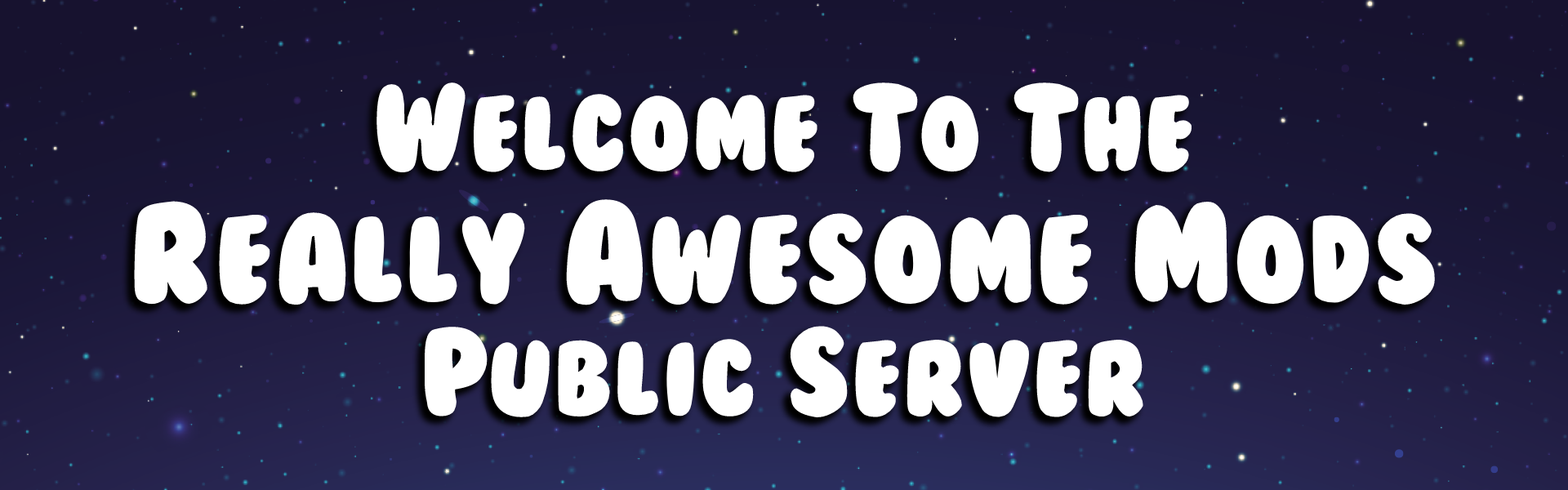
<style>
.page{position:relative;width:1568px;height:490px}
.page>*{position:absolute;margin:0}
.t1{font:98px "BubbleGum";color:#ffffff}
.t2{font:114.3px "BubbleGum";color:#ffffff}
.t3{font:130.7px "BubbleGum";color:#ffffff}
</style>
<div class="page">
<p class="t1" style="left:134px;top:82px;width:1302px;height:335px;text-align:center"><span class="t2">W </span>E L C O M E <span class="t2">T</span>O <span class="t2">T </span>H E<br><span class="t3">R  </span><span class="t2">E A L LY </span><span class="t3">A </span><span class="t2">W E S O M E </span><span class="t3">M </span><span class="t2">O D S<br>P </span>U B L I C <span class="t2">S </span>E R V E R</p>
</div>
